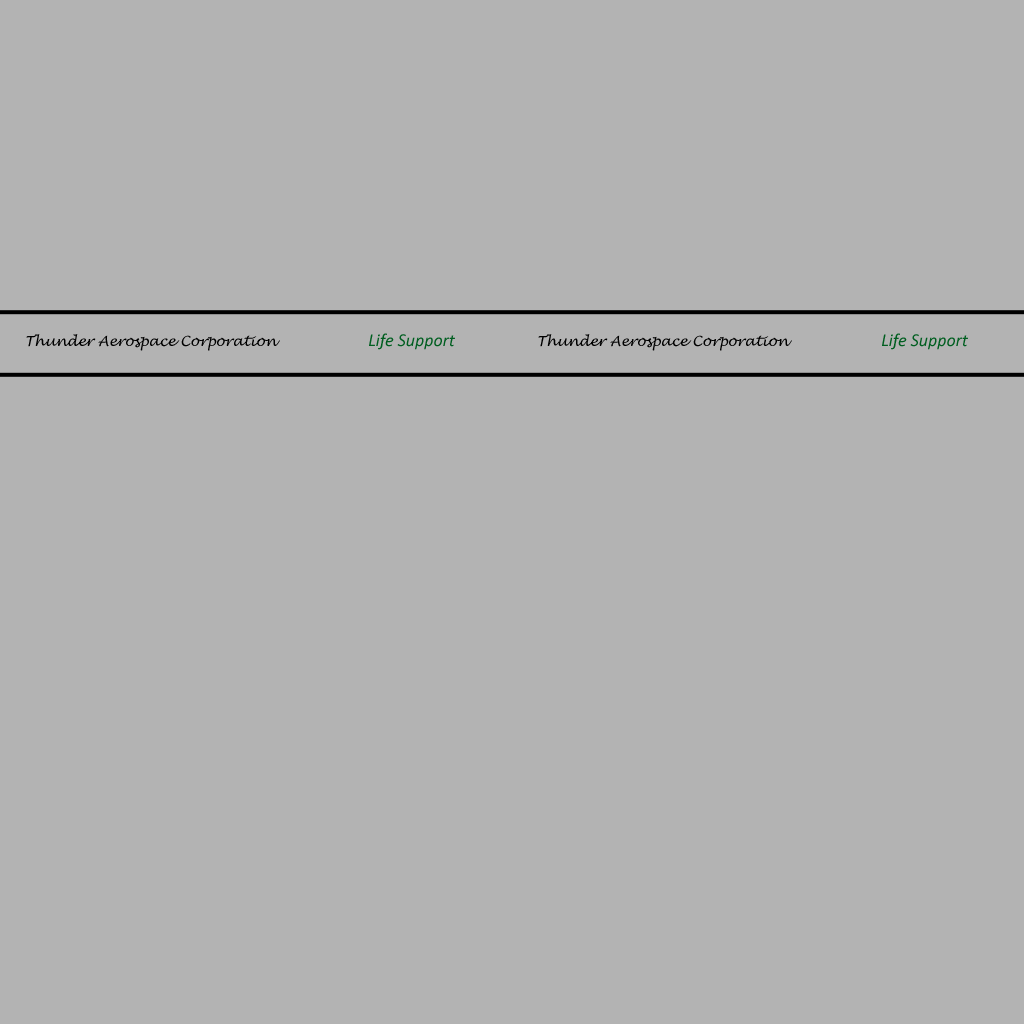
<style>
.page{position:relative;width:1024px;height:1024px;background:#b3b3b3}
.page>*{position:absolute;margin:0}
.t1{font:13.9px "LucidaHandwriting-Italic";color:#000000}
.t2{font:17.9px "Calibri-Italic";color:#005e20}
</style>
<div class="page">
<p class="t1" style="left:26px;top:334px;width:254px;height:17px">Thunder Aerospace Corporation</p>
<p class="t2" style="left:369px;top:333px;width:86px;height:17px">Life Support</p>
<p class="t1" style="left:538px;top:334px;width:254px;height:17px">Thunder Aerospace Corporation</p>
<p class="t2" style="left:882px;top:333px;width:86px;height:17px">Life Support</p>
</div>
